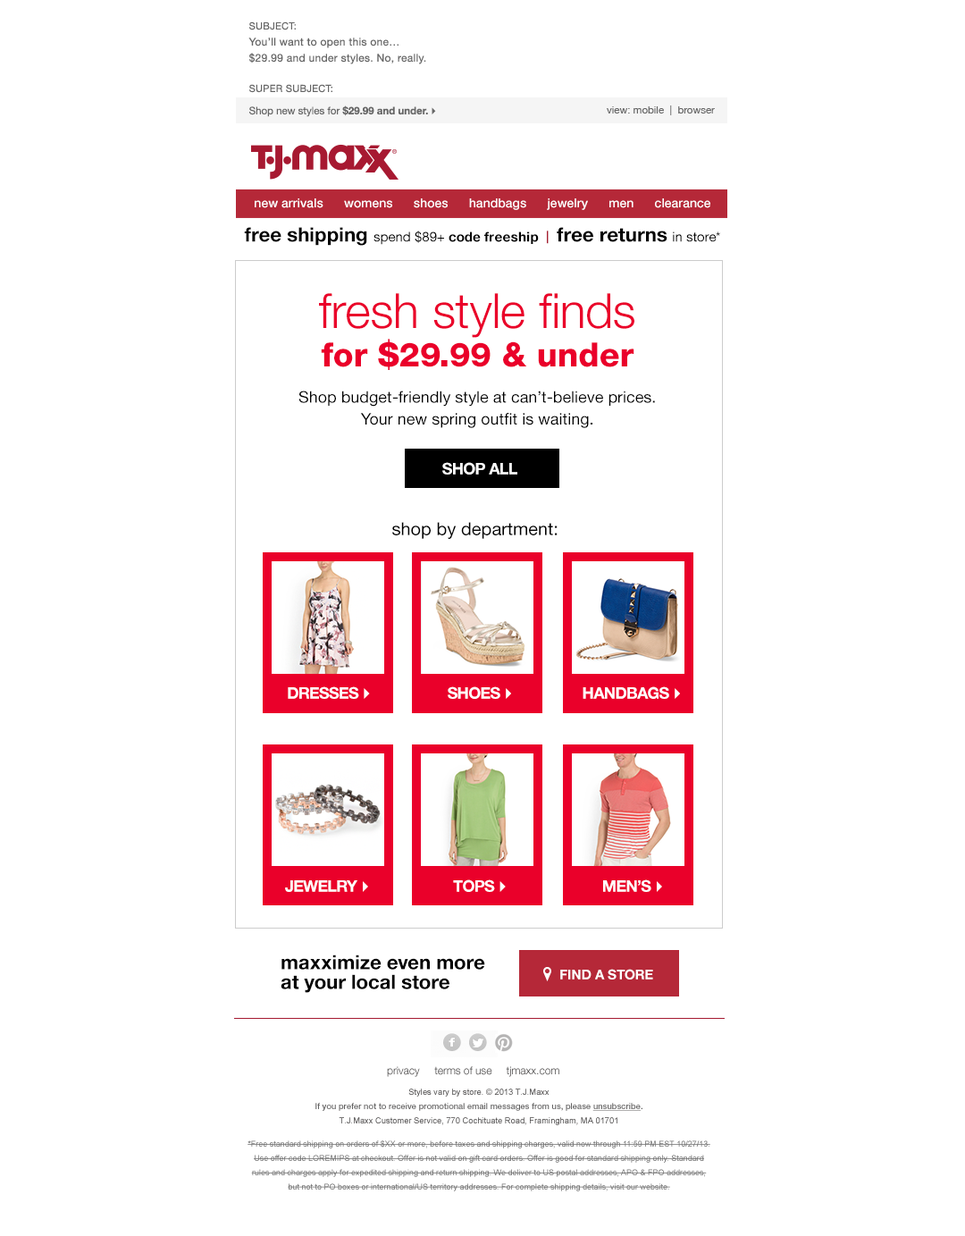
<style>
.page{position:relative;width:965px;height:1236px;background:#ffffff}
.page>*{position:absolute;margin:0}
.t1{font:10.7px/16.1px "HelveticaNeue";letter-spacing:0.025em;color:#666666}
.t2{font:9.8px/16.1px "HelveticaNeue";letter-spacing:0.025em;color:#666666;text-transform:uppercase}
.t3{font:10.3px/22.3px "HelveticaNeue";color:#666666}
.t4{font:9.8px/22.3px "HelveticaNeue";letter-spacing:0.025em;color:#666666;text-transform:uppercase}
.t5{font:10.3px/22.3px "HelveticaNeue-Bold";color:#666666}
.t6{font:10.3px/22.3px "Webdings";color:#666666}
.t7{font:10.3px "HelveticaNeue";color:#666666}
.t8{font:12.5px "HelveticaNeue-Medium";color:#ffffff}
.t9{font:19.7px "HelveticaNeue-Bold";color:#000000}
.t10{font:13.4px "HelveticaNeue";color:#000000}
.t11{font:13.4px "HelveticaNeue";color:#000000;text-transform:uppercase}
.t12{font:13.4px "HelveticaNeue-Bold";color:#000000}
.t13{font:13.4px "HelveticaNeue-Bold";letter-spacing:0.02em;color:#000000}
.t14{font:12.5px "HelveticaNeue-Bold";letter-spacing:0.02em;color:#a71e30;text-transform:uppercase}
.t15{font:48.6px/38.4px "HelveticaNeueLTStd-Lt";color:#ea002a}
.t16{font:33.4px/38.4px "HelveticaNeueLTStd-Hv";color:#ea002a}
.t17{font:33.4px/38.4px "HelveticaNeueLTStd-Hv";letter-spacing:-0.037em;color:#ea002a}
.t18{font:16.1px/21.8px "HelveticaNeueLTStd-Roman";color:#000000}
.t19{font:16.1px "HelveticaNeueLTStd-Bd";letter-spacing:-0.04em;color:#ffffff;text-transform:uppercase}
.t20{font:17.9px "HelveticaNeueLTStd-Roman";color:#000000}
.t21{font:16.1px "Webdings";letter-spacing:-0.04em;color:#ffffff;text-transform:uppercase}
.t22{font:19.7px/19.7px "HelveticaNeue-Bold";color:#000000}
.t23{font:13.4px "HelveticaNeue-Bold";color:#ffffff}
</style>
<div class="page">
<p class="t1" style="left:248px;top:21px;width:178px;height:43px"><span class="t2">Subject:<br></span>You’ll want to open this one…<br>$29.99 and under styles. No, really.</p>
<p class="t3" style="left:249px;top:84px;width:187px;height:33px"><span class="t4">Super subject:<br></span>Shop new styles for <span class="t5">$29.99 and under.</span><span class="t6">4</span></p>
<p class="t7" style="left:607px;top:105px;width:108px;height:10px">view: mobile  |  browser</p>
<p class="t8" style="left:255px;top:198px;width:455px;height:12px">new arrivals      womens      shoes      handbags      jewelry      men      clearance</p>
<p class="t9" style="left:244px;top:227px;width:476px;height:19px">free shipping <span class="t10">spend $89</span><span class="t11">+ </span><span class="t12">code </span><span class="t13">freeship  </span><span class="t14">|  </span>free returns <span class="t10">in store*</span></p>
<p class="t15" style="left:319px;top:293px;width:315px;height:77px;text-align:center">fresh style finds<br><span class="t16">for $2</span><span class="t17">9</span><span class="t16">.99 &amp; under</span></p>
<p class="t18" style="left:298px;top:390px;width:357px;height:38px;text-align:center">Shop budget-friendly style at can’t-believe prices. <br>Your new spring outfit is waiting.</p>
<p class="t19" style="left:442px;top:462px;width:75px;height:12px">Shop AlL</p>
<p class="t20" style="left:392px;top:522px;width:166px;height:17px">shop by department:</p>
<p class="t19" style="left:288px;top:686px;width:82px;height:13px">DRESSES<span class="t21">4</span></p>
<p class="t19" style="left:448px;top:686px;width:63px;height:13px">SHOES<span class="t21">4</span></p>
<p class="t19" style="left:583px;top:686px;width:97px;height:13px">Handbags<span class="t21">4</span></p>
<p class="t19" style="left:285px;top:880px;width:83px;height:12px">jewelry<span class="t21">4</span></p>
<p class="t19" style="left:453px;top:879px;width:53px;height:13px">Tops<span class="t21">4</span></p>
<p class="t19" style="left:603px;top:879px;width:59px;height:13px">Men’s<span class="t21">4</span></p>
<p class="t22" style="left:281px;top:954px;width:204px;height:39px">maxximize even more <br>at your local store</p>
<p class="t23" style="left:560px;top:969px;width:93px;height:10px">FIND A STORE</p>
</div>
